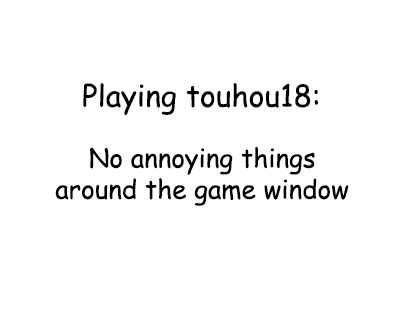
<style>
.page{position:relative;width:413px;height:330px;background:#ffffff}
.page>*{position:absolute;margin:0}
.t1{font:30px "ComicSansMS";color:#000000}
.t2{font:26px "ComicSansMS";color:#000000}
</style>
<div class="page">
<p class="t1" style="left:83px;top:82px;width:235px;height:34px">Playing touhou18:</p>
<p class="t2" style="left:55px;top:146px;width:294px;height:60px;text-align:center">No annoying things<br>around the game window</p>
</div>
